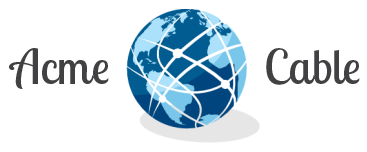
<style>
.page{position:relative;width:367px;height:152px;background:#ffffff}
.page>*{position:absolute;margin:0}
.t1{font:48px "LobsterTwo";color:#414042}
</style>
<div class="page">
<p class="t1" style="left:9px;top:48px;width:351px;height:41px">Acme               Cable</p>
</div>
